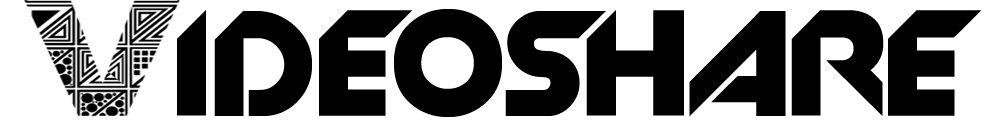
<style>
.page{position:relative;width:997px;height:131px;background:#ffffff}
.page>*{position:absolute;margin:0}
.t1{font:200px "Slant";color:#000000}
</style>
<div class="page">
<p class="t1" style="left:177px;top:9px;width:805px;height:108px">ideoshare</p>
</div>
